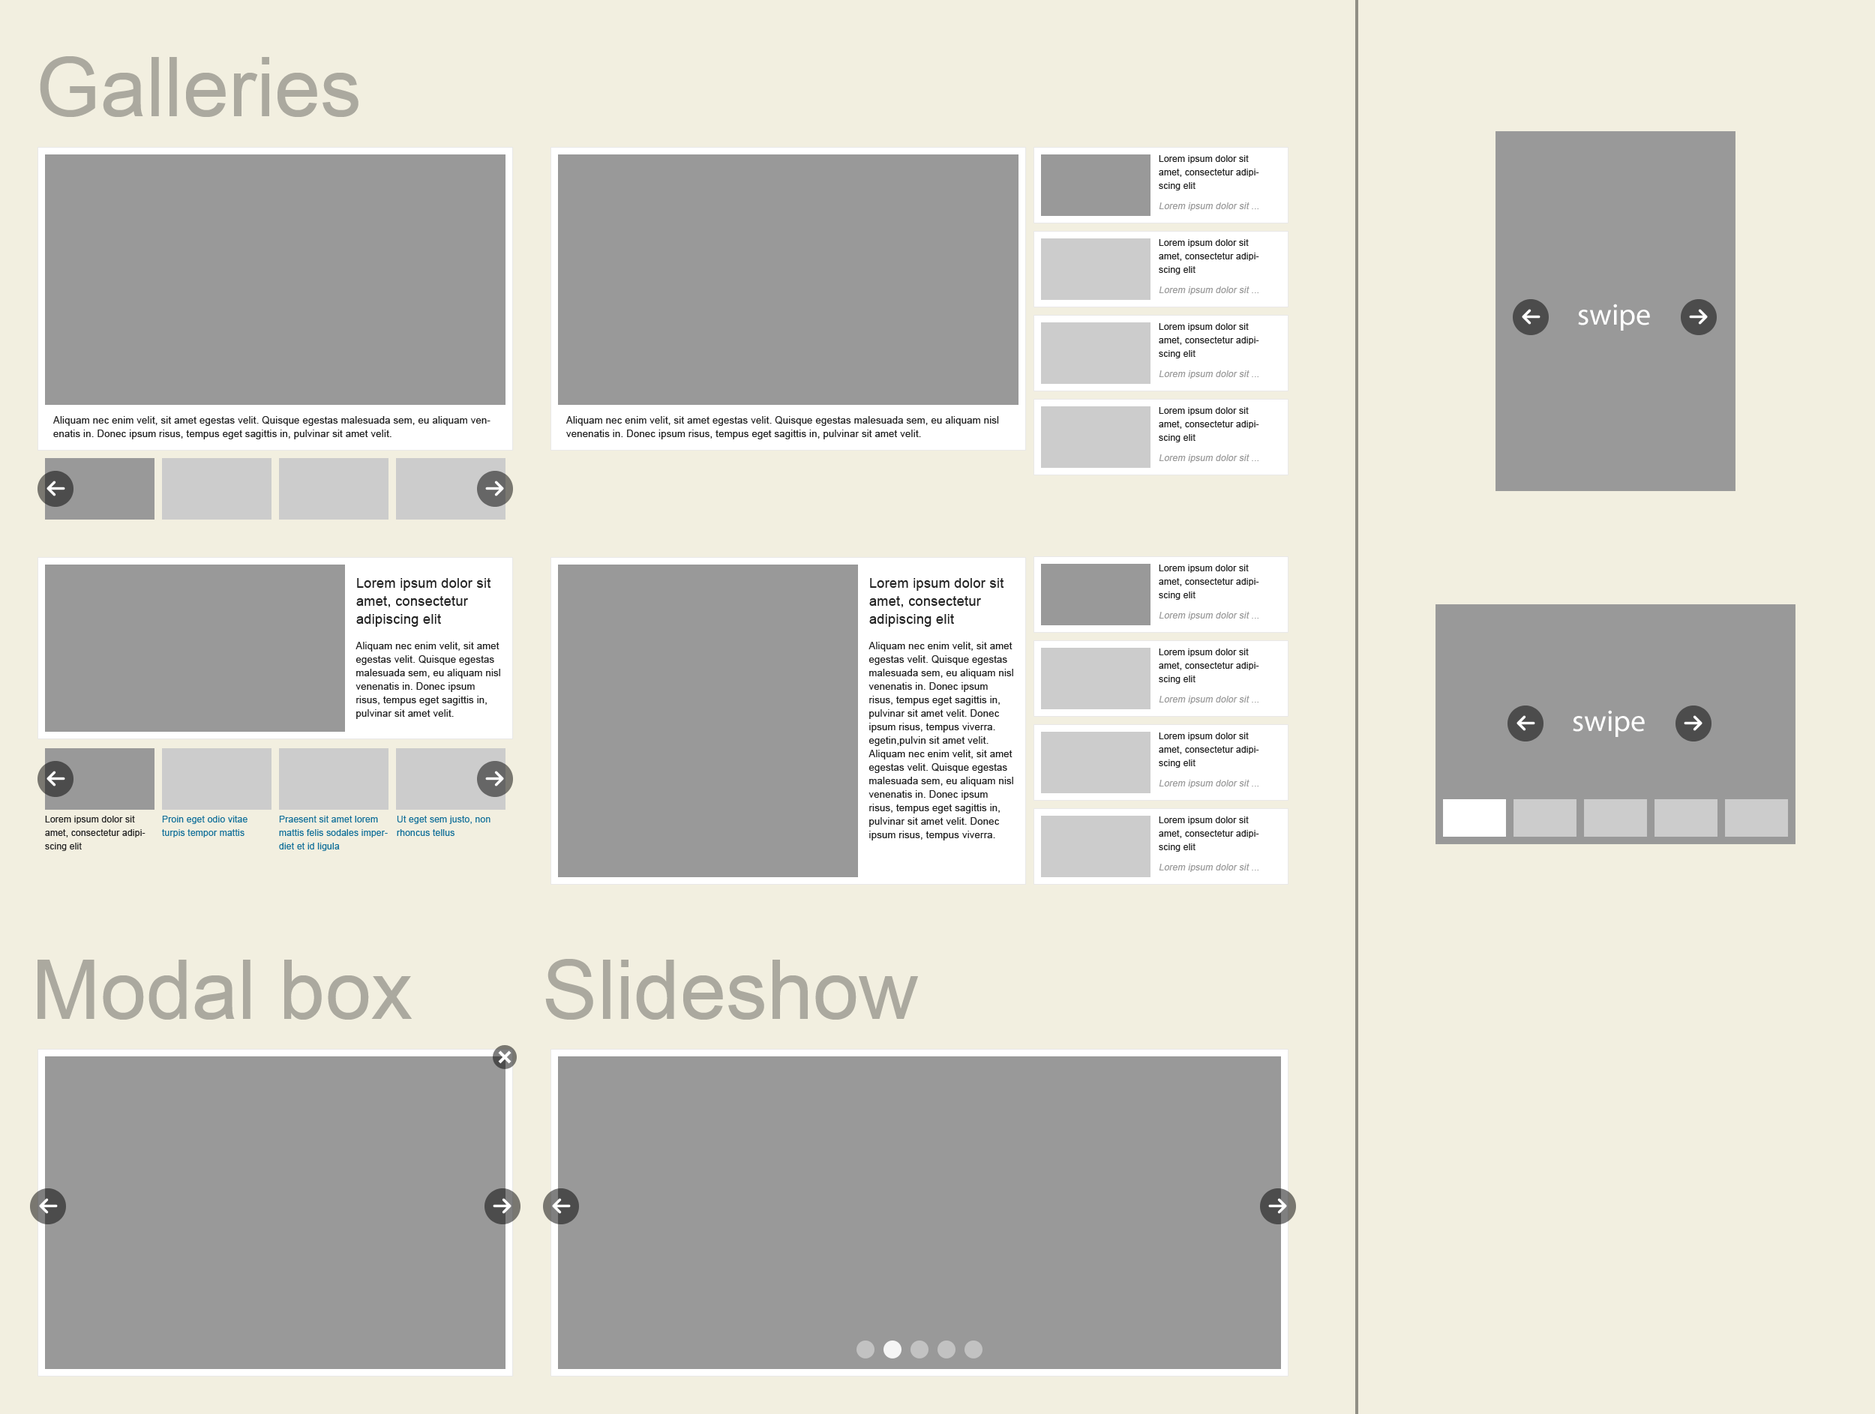
<style>
.page{position:relative;width:1875px;height:1414px;background:#f2efe0}
.page>*{position:absolute;margin:0}
.t1{font:82.5px "ArialMT";color:#aba99f}
.t2{font:9px/13.5px "ArialMT";letter-spacing:0.02em;color:#222222}
.t3{font:9px "ArialMT";letter-spacing:0.02em;color:#999999;font-style:italic}
.t4{font:30.3px "MyriadPro-Regular";color:#ffffff}
.t5{font:9.8px/13.5px "ArialMT";letter-spacing:0.02em;color:#222222}
.t6{font:13.5px/18px "ArialMT";letter-spacing:0.02em;color:#222222}
.t7{font:9.7px/13.5px "ArialMT";letter-spacing:0.02em;color:#222222}
.t8{font:9px/13.5px "ArialMT";letter-spacing:0.02em;color:#116f99}
</style>
<div class="page">
<p class="t1" style="left:40px;top:56px;width:318px;height:61px">Galleries</p>
<p class="t2" style="left:1159px;top:155px;width:100px;height:35px">Lorem ipsum dolor sit amet, consectetur adipiscing elit</p>
<p class="t3" style="left:1159px;top:202px;width:99px;height:9px">Lorem ipsum dolor sit ...</p>
<p class="t2" style="left:1159px;top:239px;width:100px;height:35px">Lorem ipsum dolor sit amet, consectetur adipiscing elit</p>
<p class="t3" style="left:1159px;top:286px;width:99px;height:9px">Lorem ipsum dolor sit ...</p>
<p class="t4" style="left:1578px;top:304px;width:72px;height:27px">swipe</p>
<p class="t2" style="left:1159px;top:323px;width:100px;height:35px">Lorem ipsum dolor sit amet, consectetur adipiscing elit</p>
<p class="t3" style="left:1159px;top:370px;width:99px;height:9px">Lorem ipsum dolor sit ...</p>
<p class="t2" style="left:1159px;top:407px;width:100px;height:35px">Lorem ipsum dolor sit amet, consectetur adipiscing elit</p>
<p class="t5" style="left:53px;top:416px;width:437px;height:24px">Aliquam nec enim velit, sit amet egestas velit. Quisque egestas malesuada sem, eu aliquam venenatis in. Donec ipsum risus, tempus eget sagittis in, pulvinar sit amet velit.</p>
<p class="t5" style="left:566px;top:416px;width:433px;height:24px">Aliquam nec enim velit, sit amet egestas velit. Quisque egestas malesuada sem, eu aliquam nisl <br>venenatis in. Donec ipsum risus, tempus eget sagittis in, pulvinar sit amet velit.</p>
<p class="t3" style="left:1159px;top:454px;width:99px;height:9px">Lorem ipsum dolor sit ...</p>
<p class="t2" style="left:1159px;top:565px;width:100px;height:35px">Lorem ipsum dolor sit amet, consectetur adipiscing elit</p>
<p class="t6" style="left:356px;top:578px;width:135px;height:49px">Lorem ipsum dolor sit amet, consectetur adipiscing elit</p>
<p class="t6" style="left:869px;top:578px;width:135px;height:49px">Lorem ipsum dolor sit amet, consectetur adipiscing elit</p>
<p class="t3" style="left:1159px;top:612px;width:99px;height:8px">Lorem ipsum dolor sit ...</p>
<p class="t5" style="left:356px;top:642px;width:144px;height:77px">Aliquam nec enim velit, sit amet egestas velit. Quisque egestas malesuada sem, eu aliquam nisl venenatis in. Donec ipsum risus, tempus eget sagittis in, pulvinar sit amet velit.</p>
<p class="t7" style="left:868px;top:642px;width:145px;height:199px">Aliquam nec enim velit, sit amet egestas velit. Quisque egestas malesuada sem, eu aliquam nisl venenatis in. Donec ipsum risus, tempus eget sagittis in, pulvinar sit amet velit. Donec ipsum risus, tempus viverra. egetin,pulvin sit amet velit. Aliquam nec enim velit, sit amet egestas velit. Quisque egestas malesuada sem, eu aliquam nisl venenatis in. Donec ipsum risus, tempus eget sagittis in, pulvinar sit amet velit. Donec ipsum risus, tempus viverra.</p>
<p class="t2" style="left:1159px;top:649px;width:100px;height:35px">Lorem ipsum dolor sit amet, consectetur adipiscing elit</p>
<p class="t3" style="left:1159px;top:696px;width:99px;height:8px">Lorem ipsum dolor sit ...</p>
<p class="t4" style="left:1573px;top:710px;width:72px;height:27px">swipe</p>
<p class="t2" style="left:1159px;top:733px;width:100px;height:35px">Lorem ipsum dolor sit amet, consectetur adipiscing elit</p>
<p class="t3" style="left:1159px;top:780px;width:99px;height:8px">Lorem ipsum dolor sit ...</p>
<p class="t2" style="left:45px;top:816px;width:101px;height:35px">Lorem ipsum dolor sit amet, consectetur adipiscing elit</p>
<p class="t8" style="left:162px;top:816px;width:86px;height:22px">Proin eget odio vitae turpis tempor mattis</p>
<p class="t8" style="left:279px;top:816px;width:109px;height:35px">Praesent sit amet lorem mattis felis sodales imperdiet et id ligula</p>
<p class="t8" style="left:397px;top:816px;width:93px;height:20px">Ut eget sem justo, non rhoncus tellus</p>
<p class="t2" style="left:1159px;top:817px;width:100px;height:35px">Lorem ipsum dolor sit amet, consectetur adipiscing elit</p>
<p class="t3" style="left:1159px;top:864px;width:99px;height:8px">Lorem ipsum dolor sit ...</p>
<p class="t1" style="left:38px;top:960px;width:374px;height:60px">Modal box</p>
<p class="t1" style="left:545px;top:959px;width:373px;height:61px">Slideshow</p>
</div>
